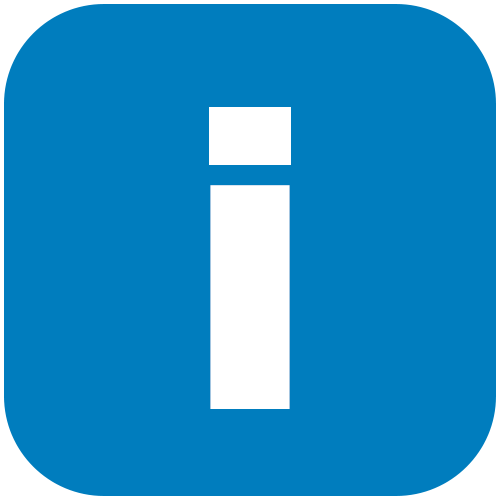
<style>
.page{position:relative;width:500px;height:500px;background:#007dbe}
.page>*{position:absolute;margin:0}
.t1{font:413.4px "Gotham-Black";color:#ffffff}
</style>
<div class="page">
<p class="t1" style="left:209px;top:107px;width:82px;height:302px">i</p>
</div>
